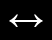
<style>
.page{position:relative;width:52px;height:40px;background:#000000}
.page>*{position:absolute;margin:0}
.t1{font:36px "ArialMT";color:#ffffff;font-variant:small-caps}
</style>
<div class="page">
<p class="t1" style="left:9px;top:14px;width:34px;height:13px">↔</p>
</div>
